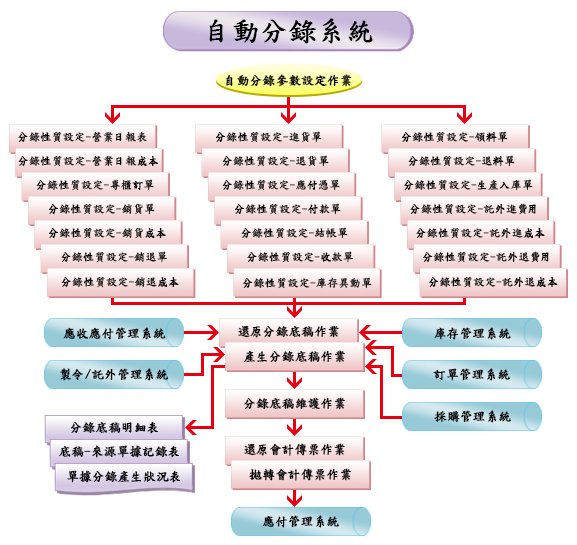
<style>
.page{position:relative;width:577px;height:545px;background:#ffffff}
.page>*{position:absolute;margin:0}
.t1{font:27.5px "DFKaiShu-SB-Estd-BF";color:#000000;font-weight:bold}
.t2{font:12.5px "DFKaiShu-SB-Estd-BF";color:#000000;font-weight:bold}
.t3{font:11px "DFKaiShu-SB-Estd-BF";color:#000000;font-weight:bold}
</style>
<div class="page">
<p class="t1" style="left:209px;top:18px;width:164px;height:26px">自動分錄系統</p>
<p class="t2" style="left:226px;top:74px;width:126px;height:13px">自動分錄參數設定作業</p>
<p class="t3" style="left:18px;top:131px;width:129px;height:12px">分錄性質設定-營業日報表</p>
<p class="t3" style="left:216px;top:131px;width:106px;height:12px">分錄性質設定-進貨單</p>
<p class="t3" style="left:402px;top:131px;width:106px;height:12px">分錄性質設定-領料單</p>
<p class="t3" style="left:18px;top:155px;width:140px;height:12px">分錄性質設定-營業日報成本</p>
<p class="t3" style="left:222px;top:155px;width:107px;height:12px">分錄性質設定-退貨單</p>
<p class="t3" style="left:408px;top:155px;width:107px;height:12px">分錄性質設定-退料單</p>
<p class="t3" style="left:36px;top:179px;width:118px;height:12px">分錄性質設定-專櫃訂單</p>
<p class="t3" style="left:222px;top:179px;width:118px;height:12px">分錄性質設定-應付憑單</p>
<p class="t3" style="left:404px;top:179px;width:129px;height:12px">分錄性質設定-生產入庫單</p>
<p class="t3" style="left:49px;top:203px;width:106px;height:12px">分錄性質設定-銷貨單</p>
<p class="t3" style="left:235px;top:203px;width:106px;height:12px">分錄性質設定-付款單</p>
<p class="t3" style="left:410px;top:203px;width:126px;height:12px">分錄性質設定-託外進費用</p>
<p class="t3" style="left:49px;top:227px;width:117px;height:12px">分錄性質設定-銷貨成本</p>
<p class="t3" style="left:241px;top:227px;width:107px;height:12px">分錄性質設定-結帳單</p>
<p class="t3" style="left:416px;top:227px;width:129px;height:12px">分錄性質設定-託外進成本</p>
<p class="t3" style="left:61px;top:251px;width:106px;height:12px">分錄性質設定-銷退單</p>
<p class="t3" style="left:247px;top:251px;width:106px;height:12px">分錄性質設定-收款單</p>
<p class="t3" style="left:423px;top:251px;width:126px;height:12px">分錄性質設定-託外退費用</p>
<p class="t3" style="left:61px;top:276px;width:118px;height:12px">分錄性質設定-銷退成本</p>
<p class="t3" style="left:243px;top:277px;width:129px;height:12px">分錄性質設定-庫存異動單</p>
<p class="t3" style="left:429px;top:276px;width:129px;height:12px">分錄性質設定-託外退成本</p>
<p class="t2" style="left:63px;top:327px;width:103px;height:13px">應收應付管理系統</p>
<p class="t2" style="left:238px;top:325px;width:101px;height:13px">還原分錄底稿作業</p>
<p class="t2" style="left:434px;top:327px;width:77px;height:13px">庫存管理系統</p>
<p class="t2" style="left:243px;top:350px;width:103px;height:13px">產生分錄底稿作業</p>
<p class="t2" style="left:60px;top:368px;width:109px;height:13px">製令/託外管理系統</p>
<p class="t2" style="left:433px;top:368px;width:77px;height:13px">訂單管理系統</p>
<p class="t2" style="left:244px;top:397px;width:102px;height:13px">分錄底稿維護作業</p>
<p class="t2" style="left:434px;top:410px;width:77px;height:13px">採購管理系統</p>
<p class="t2" style="left:70px;top:422px;width:88px;height:12px">分錄底稿明細表</p>
<p class="t2" style="left:59px;top:445px;width:120px;height:13px">底稿-來源單據記錄表</p>
<p class="t2" style="left:244px;top:443px;width:101px;height:13px">還原會計傳票作業</p>
<p class="t2" style="left:67px;top:470px;width:114px;height:13px">單據分錄產生狀況表</p>
<p class="t2" style="left:249px;top:468px;width:103px;height:13px">拋轉會計傳票作業</p>
<p class="t2" style="left:262px;top:515px;width:77px;height:13px">應付管理系統</p>
</div>
